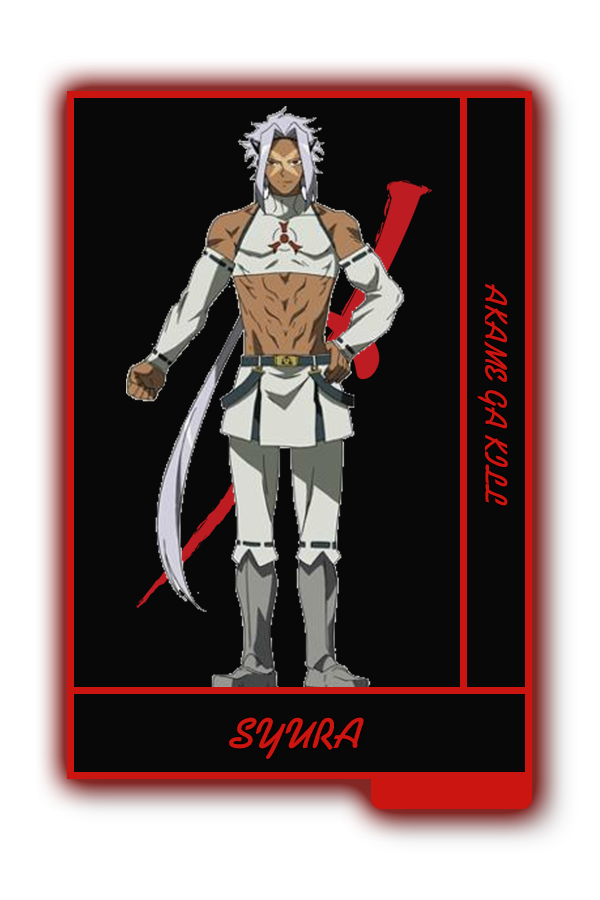
<style>
.page{position:relative;width:600px;height:900px;background:#080808}
.page>*{position:absolute;margin:0}
.t1{font:31.2px "Alako-Bold";color:#cb1511}
.t2{font:43.2px "Alako-Bold";color:#cb1511}
</style>
<div class="page">
<p class="t1" style="left:477px;top:283px;width:31px;height:223px;rotate:90deg">AKAME GA KILL</p>
<p class="t2" style="left:229px;top:717px;width:135px;height:42px">SYURA</p>
</div>
